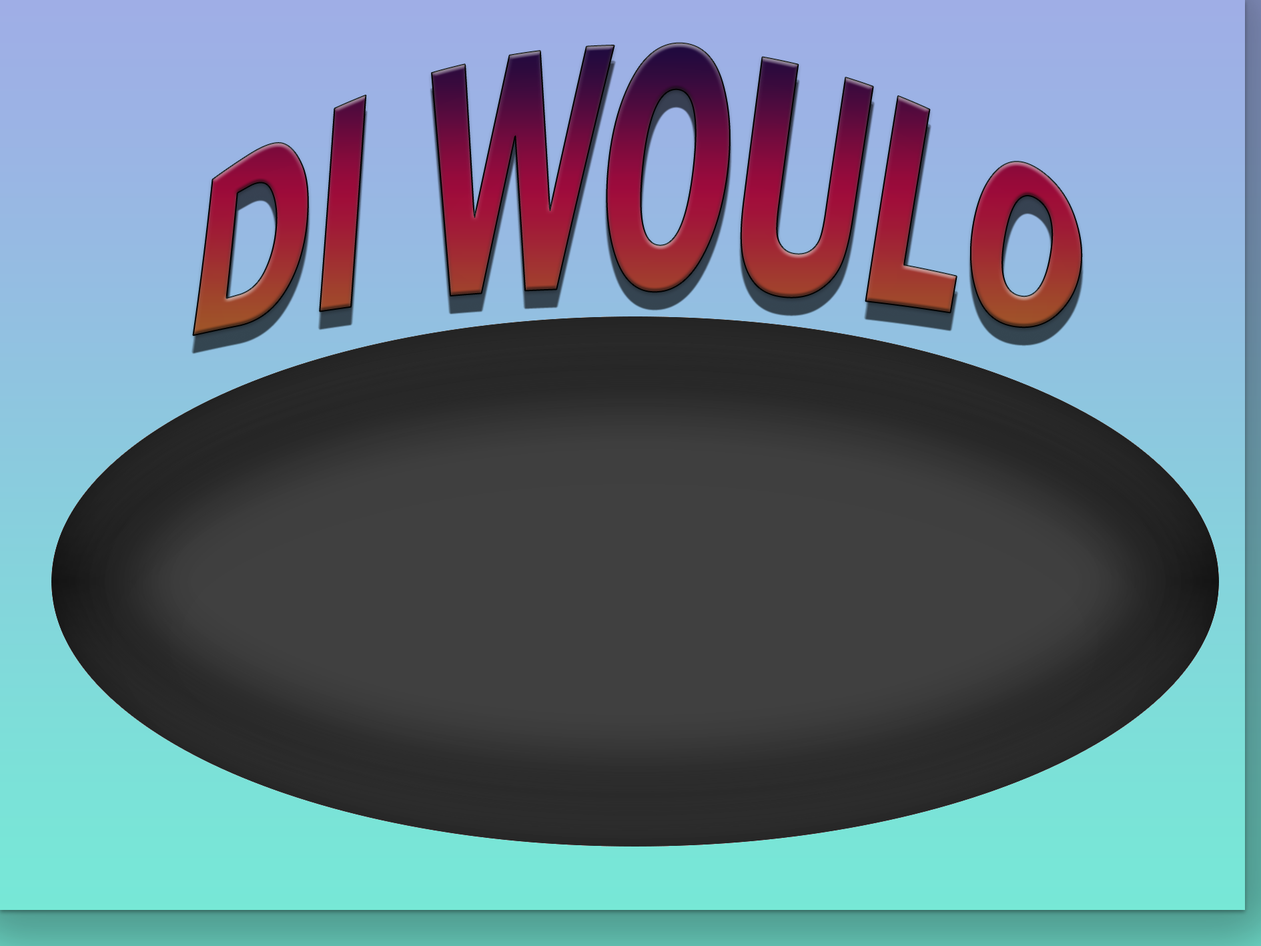
<style>
.page{position:relative;width:1261px;height:946px}
.page>*{position:absolute;margin:0}
.t1{font:200.2px "FranklinGothic-Demi";font-style:italic}
</style>
<div class="page">
<p class="t1" style="left:193px;top:43px;width:889px;height:293px">DI WOULO</p>
</div>
